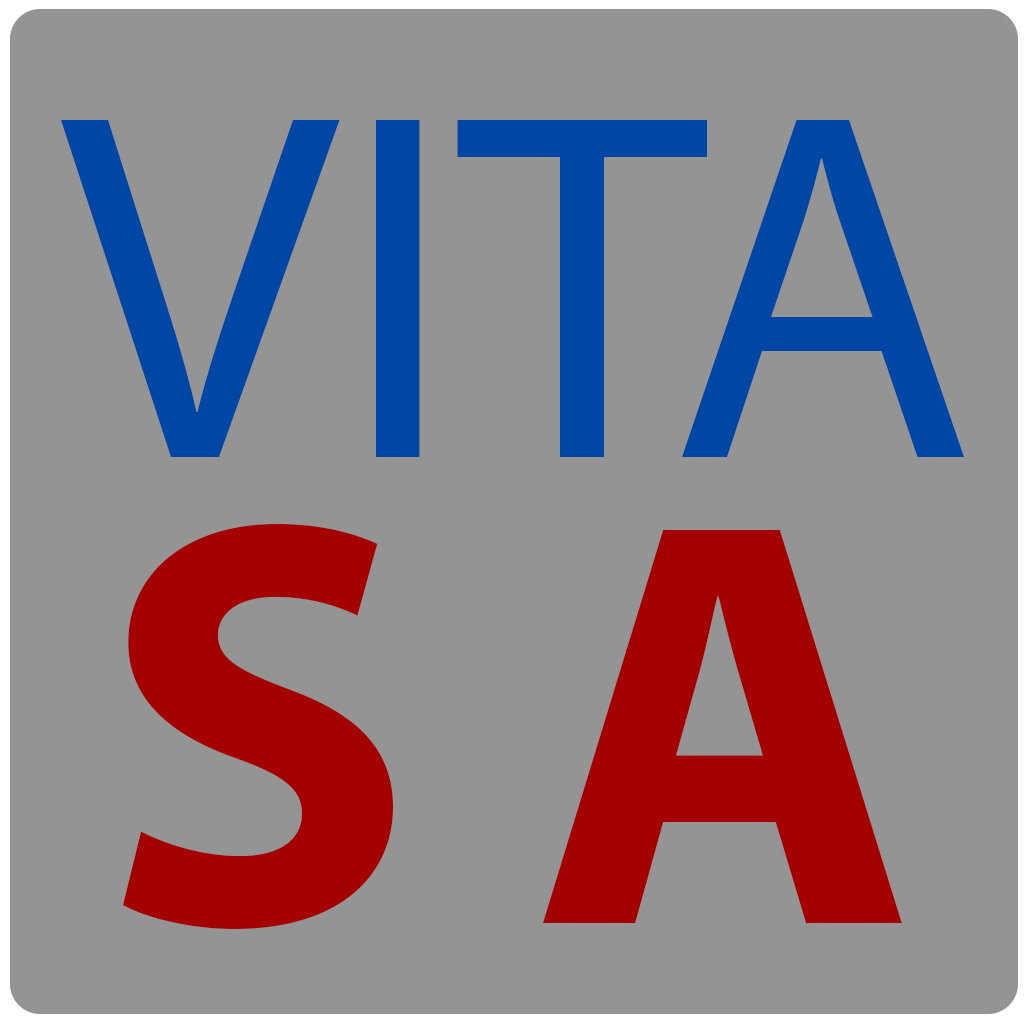
<style>
.page{position:relative;width:1024px;height:1024px;background:#959494}
.page>*{position:absolute;margin:0}
.t1{font:500px "MyriadPro-Regular";color:#0047a5}
.t2{font:583.3px "MyriadPro-Bold";color:#a50000}
</style>
<div class="page">
<p class="t1" style="left:61px;top:120px;width:903px;height:337px">VITA</p>
<p class="t2" style="left:123px;top:523px;width:779px;height:407px">S A</p>
</div>
